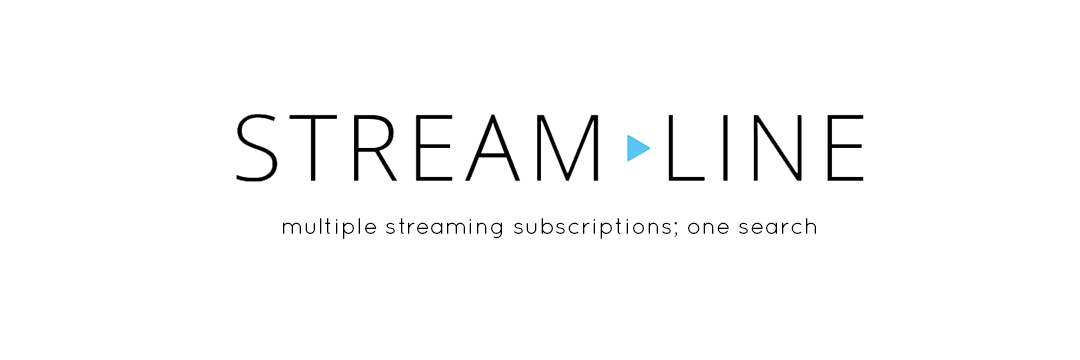
<style>
.page{position:relative;width:1080px;height:360px;background:#ffffff}
.page>*{position:absolute;margin:0}
.t1{font:23.1px "Quicksand-Regular";letter-spacing:0.025em;color:#000000}
</style>
<div class="page">
<p class="t1" style="left:283px;top:218px;width:533px;height:21px">multiple streaming subscriptions; one search</p>
</div>
